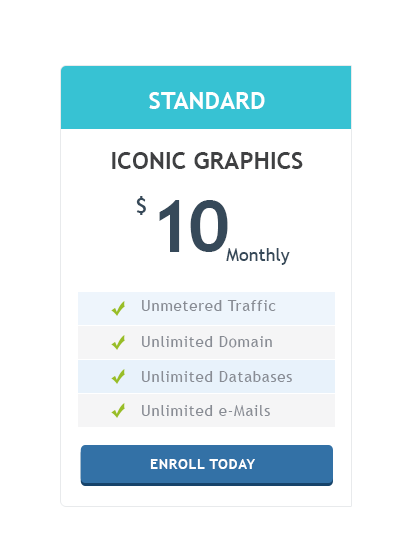
<style>
.page{position:relative;width:406px;height:558px;background:#ffffff}
.page>*{position:absolute;margin:0}
.t1{font:24px/60px "TrebuchetMS-Bold";color:#3f4042;text-transform:uppercase}
.t2{font:24px/60px "TrebuchetMS-Bold";color:#ffffff;text-transform:uppercase}
.t3{font:36px "TrebuchetMS-Bold";letter-spacing:-0.05em;color:#364959;text-transform:uppercase}
.t4{font:72px "TrebuchetMS-Bold";letter-spacing:-0.05em;color:#364959;text-transform:uppercase}
.t5{font:18px "TrebuchetMS";color:#364959}
.t6{font:15px "TrebuchetMS";letter-spacing:0.05em;color:#888c94}
.t7{font:14px "TrebuchetMS-Bold";letter-spacing:0.05em;color:#ffffff;text-transform:uppercase}
</style>
<div class="page">
<p class="t1" style="left:112px;top:92px;width:191px;height:77px;text-align:center"><span class="t2">Standard<br></span>iconic graphics</p>
<p class="t3" style="left:136px;top:196px;width:10px;height:19px">$</p>
<p class="t4" style="left:159px;top:200px;width:69px;height:52px">10</p>
<p class="t5" style="left:226px;top:248px;width:64px;height:17px">Monthly</p>
<p class="t6" style="left:142px;top:300px;width:134px;height:11px">Unmetered Traffic</p>
<p class="t6" style="left:142px;top:336px;width:130px;height:12px">Unlimited Domain</p>
<p class="t6" style="left:142px;top:371px;width:150px;height:11px">Unlimited Databases</p>
<p class="t6" style="left:142px;top:405px;width:128px;height:11px">Unlimited e-Mails</p>
<p class="t7" style="left:150px;top:459px;width:105px;height:10px">Enroll Today</p>
</div>
